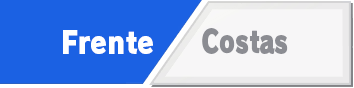
<style>
.page{position:relative;width:354px;height:88px;background:#1b61e3}
.page>*{position:absolute;margin:0}
.t1{font:30.7px "RodinPro-UB";letter-spacing:-0.011em;color:#ffffff;scale:0.87 1}
.t2{font:30.7px "RodinPro-UB";letter-spacing:-0.011em;color:#8b8c92;scale:0.78 1}
</style>
<div class="page">
<p class="t1" style="left:63px;top:30px;width:90px;height:24px">Frente</p>
<p class="t2" style="left:202px;top:28px;width:86px;height:26px">Costas</p>
</div>
